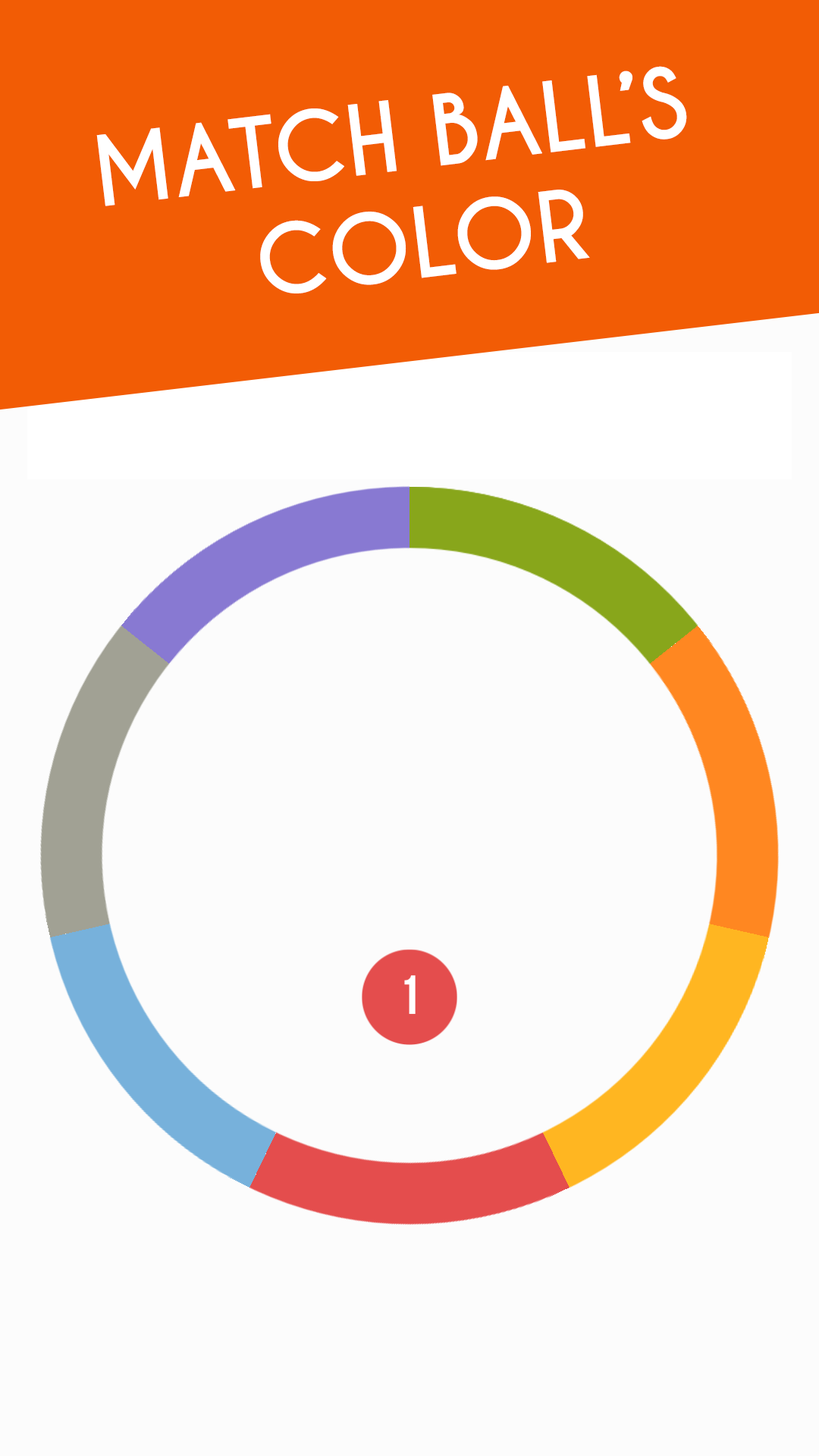
<style>
.page{position:relative;width:819px;height:1456px;background:#fcfcfc}
.page>*{position:absolute;margin:0}
.t1{font:91px "CaviarDreams-Bold";color:#ffffff}
</style>
<div class="page">
<p class="t1" style="left:96px;top:66px;width:591px;height:227px;rotate:-7deg">MATCH BALL’S<br>    COLOR</p>
</div>
